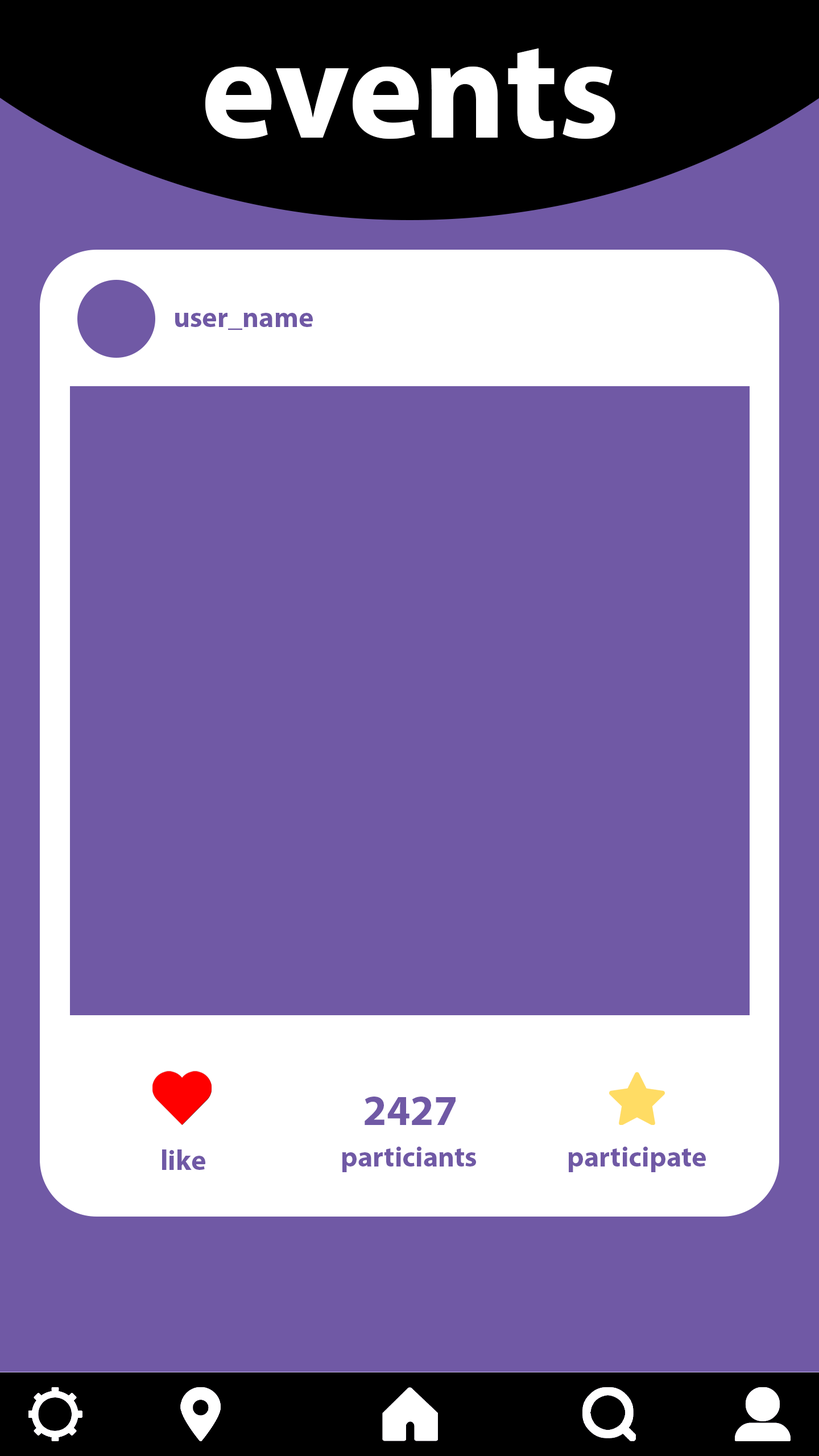
<style>
.page{position:relative;width:819px;height:1456px;background:#7059a5}
.page>*{position:absolute;margin:0}
.t1{font:142.2px "MyriadPro-Bold";color:#ffffff}
.t2{font:28.4px "MyriadPro-Bold";color:#7059a5}
.t3{font:42.7px "MyriadPro-Bold";color:#7059a5}
</style>
<div class="page">
<p class="t1" style="left:205px;top:48px;width:410px;height:91px">events</p>
<p class="t2" style="left:175px;top:313px;width:138px;height:17px">user_name</p>
<p class="t3" style="left:365px;top:1097px;width:91px;height:28px">2427</p>
<p class="t2" style="left:162px;top:1149px;width:43px;height:21px">like</p>
<p class="t2" style="left:342px;top:1147px;width:134px;height:25px">particiants</p>
<p class="t2" style="left:568px;top:1147px;width:138px;height:25px">participate</p>
</div>
